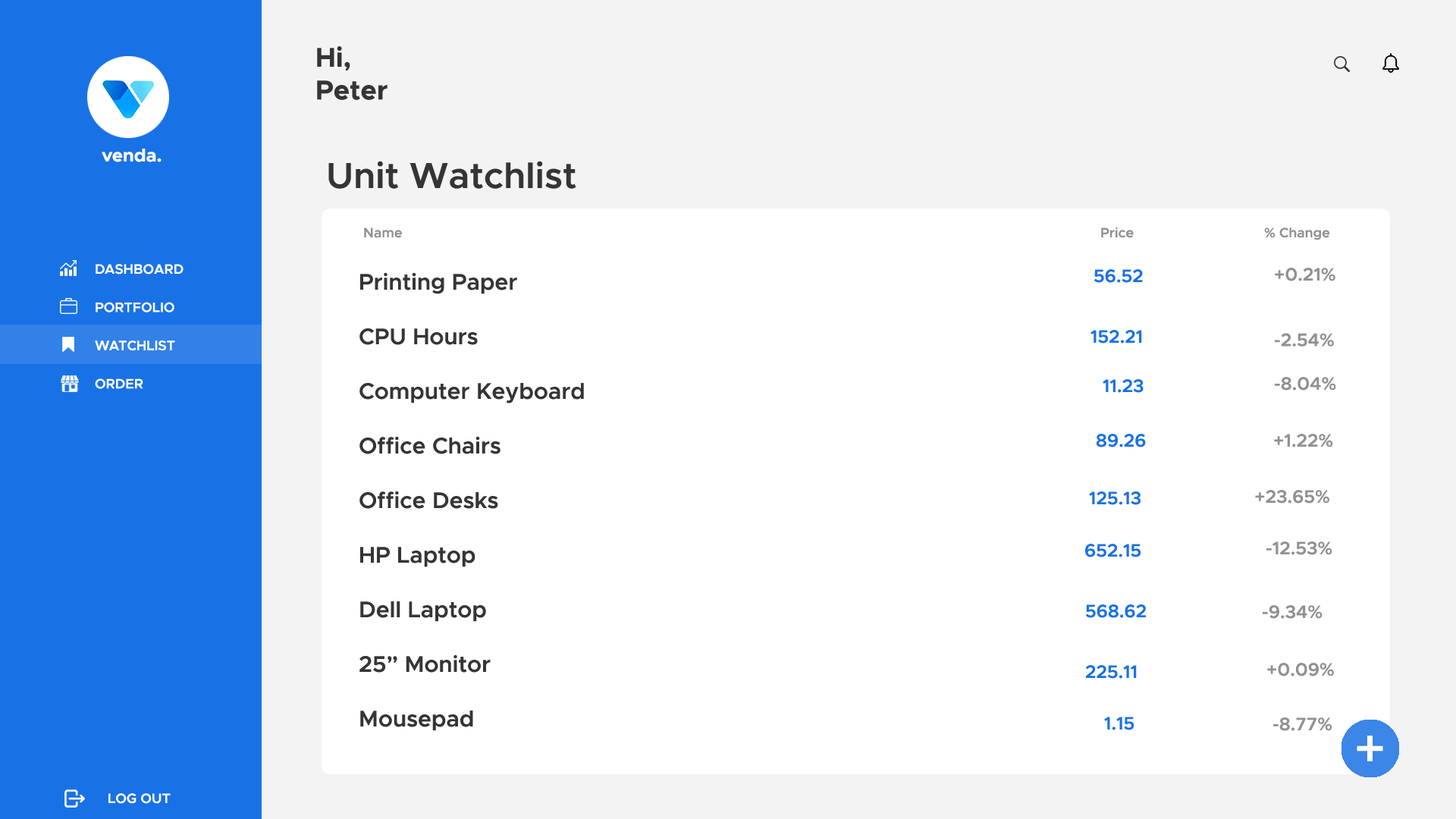
<style>
.page{position:relative;width:1456px;height:819px;background:#ffffff}
.page>*{position:absolute;margin:0}
.t1{font:27.3px "Metropolis-Bold";color:#353536}
.t2{font:18.2px "Metropolis-Bold";color:#ffffff}
.t3{font:36.4px "Metropolis-SemiBold";color:#353536}
.t4{font:13.6px "Metropolis-SemiBold";color:#919191}
.t5{font:13.6px "Metropolis-SemiBold";color:#ffffff}
.t6{font:18.2px "Metropolis-SemiBold";color:#1872e5}
.t7{font:18.2px "Metropolis-SemiBold";color:#919191}
.t8{font:22.7px "Metropolis-SemiBold";color:#353536}
.t9{font:54.6px "Metropolis-Medium";color:#ffffff}
</style>
<div class="page">
<p class="t1" style="left:317px;top:46px;width:71px;height:54px">Hi,<br>Peter</p>
<p class="t2" style="left:102px;top:149px;width:60px;height:13px">venda.</p>
<p class="t3" style="left:328px;top:161px;width:248px;height:28px">Unit Watchlist</p>
<p class="t4" style="left:364px;top:227px;width:966px;height:13px">Name                          Price     % Change</p>
<p class="t5" style="left:95px;top:264px;width:89px;height:125px">DASHBOARD<br><br>PORTFOLIO<br><br>WATCHLIST<br><br>ORDER</p>
<p class="t6" style="left:1094px;top:269px;width:49px;height:14px">56.52</p>
<p class="t7" style="left:1275px;top:268px;width:61px;height:123px">+0.21%<br><br><br>-2.54%<br><br>-8.04%</p>
<p class="t8" style="left:359px;top:272px;width:225px;height:459px">Printing Paper<br><br>CPU Hours<br><br>Computer Keyboard<br><br>Office Chairs<br><br>Office Desks<br><br>HP Laptop<br><br>Dell Laptop<br><br>25” Monitor<br><br>Mousepad</p>
<p class="t6" style="left:1090px;top:330px;width:52px;height:14px">152.21</p>
<p class="t6" style="left:1103px;top:379px;width:41px;height:14px">11.23</p>
<p class="t6" style="left:1097px;top:434px;width:49px;height:13px">89.26</p>
<p class="t7" style="left:1274px;top:434px;width:59px;height:13px">+1.22%</p>
<p class="t6" style="left:1089px;top:491px;width:52px;height:14px">125.13</p>
<p class="t7" style="left:1255px;top:490px;width:74px;height:14px">+23.65%</p>
<p class="t6" style="left:1085px;top:544px;width:56px;height:13px">652.15</p>
<p class="t7" style="left:1266px;top:541px;width:66px;height:14px">-12.53%</p>
<p class="t6" style="left:1086px;top:604px;width:60px;height:14px">568.62</p>
<p class="t7" style="left:1263px;top:605px;width:60px;height:14px">-9.34%</p>
<p class="t6" style="left:1086px;top:665px;width:51px;height:14px">225.11</p>
<p class="t7" style="left:1267px;top:663px;width:67px;height:13px">+0.09%</p>
<p class="t6" style="left:1104px;top:717px;width:30px;height:13px">1.15</p>
<p class="t7" style="left:1273px;top:717px;width:59px;height:14px">-8.77%</p>
<p class="t9" style="left:1357px;top:736px;width:26px;height:25px">+</p>
<p class="t5" style="left:108px;top:793px;width:63px;height:11px">LOG OUT</p>
</div>
